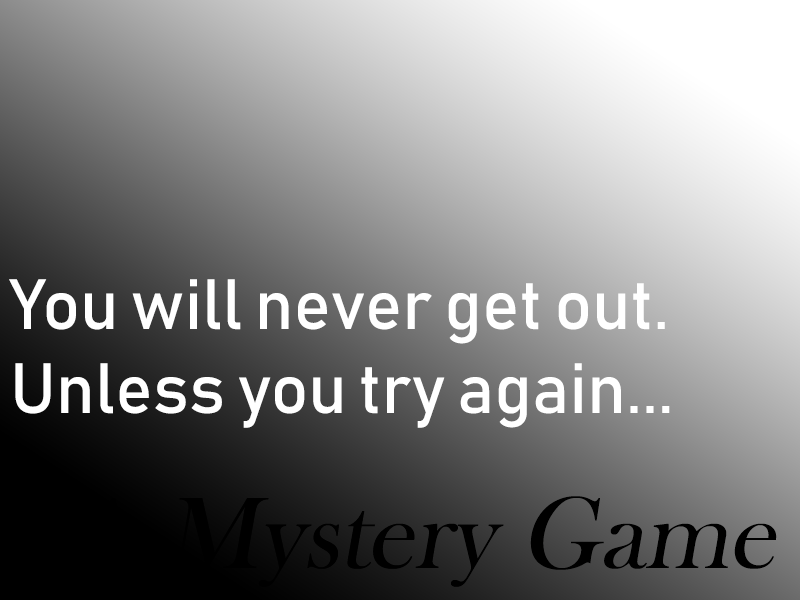
<style>
.page{position:relative;width:800px;height:600px}
.page>*{position:absolute;margin:0}
.t1{font:70px "Bahnschrift";color:#ffffff;font-style:italic}
.t2{font:105px "BaskOldFace";color:#000000;font-style:italic}
</style>
<div class="page">
<p class="t1" style="left:9px;top:279px;width:661px;height:149px">You will never get out.<br>Unless you try again...</p>
<p class="t2" style="left:65px;top:496px;width:712px;height:91px">A Mystery Game</p>
</div>
